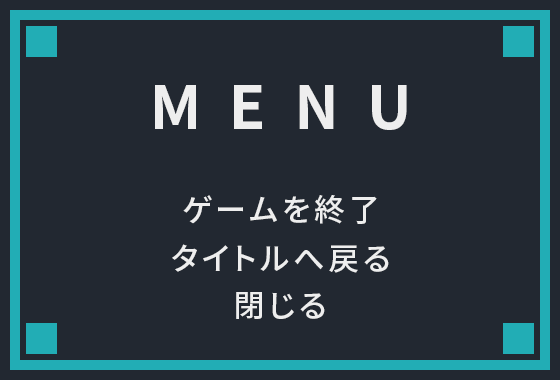
<style>
.page{position:relative;width:560px;height:380px;background:#222831}
.page>*{position:absolute;margin:0}
.t1{font:60px "SourceHanSansJP-Bold";letter-spacing:0.12em;color:#eeeeee}
.t2{font:31px "SourceHanSansJP-Medium";letter-spacing:0.12em;color:#eeeeee}
</style>
<div class="page">
<p class="t1" style="left:155px;top:85px;width:252px;height:45px">M E N U</p>
<p class="t2" style="left:183px;top:195px;width:194px;height:29px">ゲームを終了</p>
<p class="t2" style="left:172px;top:244px;width:217px;height:29px">タイトルへ戻る</p>
<p class="t2" style="left:236px;top:292px;width:89px;height:27px">閉じる</p>
</div>
